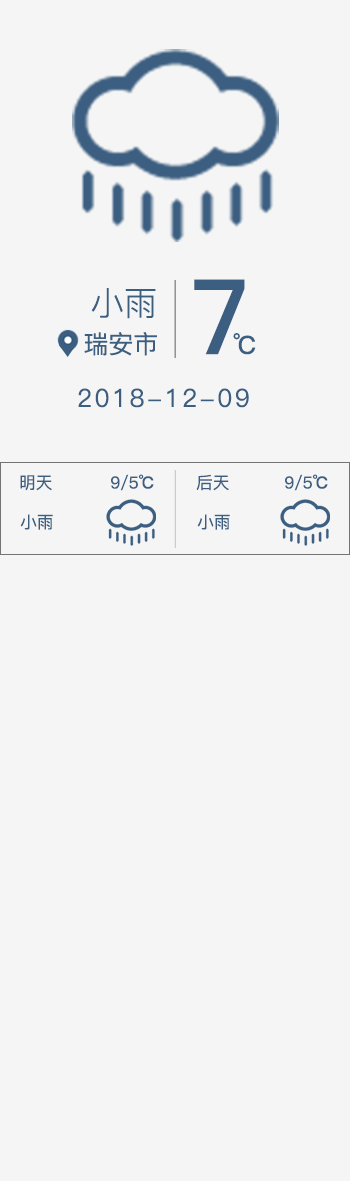
<style>
.page{position:relative;width:350px;height:1181px;background:#f5f5f5}
.page>*{position:absolute;margin:0}
.t1{font:104.4px "PingFang-SC-Bold";color:#3c5f81}
.t2{font:33.3px "PingFang-SC-Regular";color:#3c5f81}
.t3{font:25px "PingFang-SC-Medium";color:#3c5f81}
.t4{font:25px "PingFang-SC-Bold";color:#3c5f81}
.t5{font:25px "PingFang-SC-Medium";letter-spacing:0.1em;color:#3c5f81}
.t6{font:16.7px "PingFang-SC-Medium";color:#3c5f81}
.t7{font:16.7px "PingFang-SC-Bold";color:#3c5f81}
</style>
<div class="page">
<p class="t1" style="left:194px;top:279px;width:51px;height:76px">7</p>
<p class="t2" style="left:91px;top:288px;width:65px;height:31px">小雨</p>
<p class="t3" style="left:84px;top:332px;width:73px;height:24px">瑞安市</p>
<p class="t4" style="left:233px;top:333px;width:23px;height:22px">℃</p>
<p class="t5" style="left:78px;top:388px;width:171px;height:20px">2018-12-09</p>
<p class="t6" style="left:20px;top:475px;width:32px;height:16px">明天</p>
<p class="t6" style="left:111px;top:474px;width:43px;height:17px">9/5<span class="t7">℃</span></p>
<p class="t6" style="left:196px;top:474px;width:33px;height:17px">后天</p>
<p class="t6" style="left:285px;top:474px;width:43px;height:17px">9/5<span class="t7">℃</span></p>
<p class="t6" style="left:20px;top:514px;width:33px;height:16px">小雨</p>
<p class="t6" style="left:197px;top:514px;width:33px;height:16px">小雨</p>
</div>
